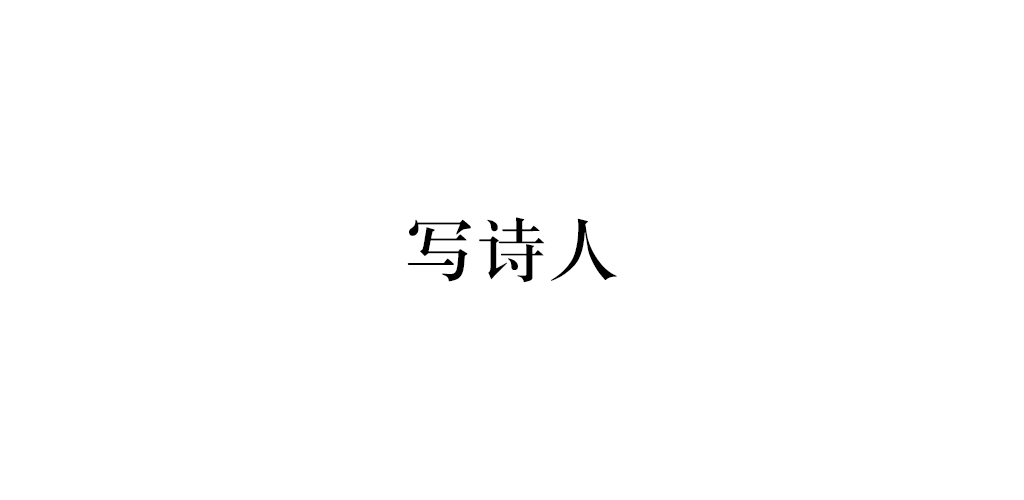
<style>
.page{position:relative;width:1024px;height:500px;background:#ffffff}
.page>*{position:absolute;margin:0}
.t1{font:72px "HYa3gj";color:#000000}
</style>
<div class="page">
<p class="t1" style="left:407px;top:217px;width:210px;height:66px">写诗人</p>
</div>
